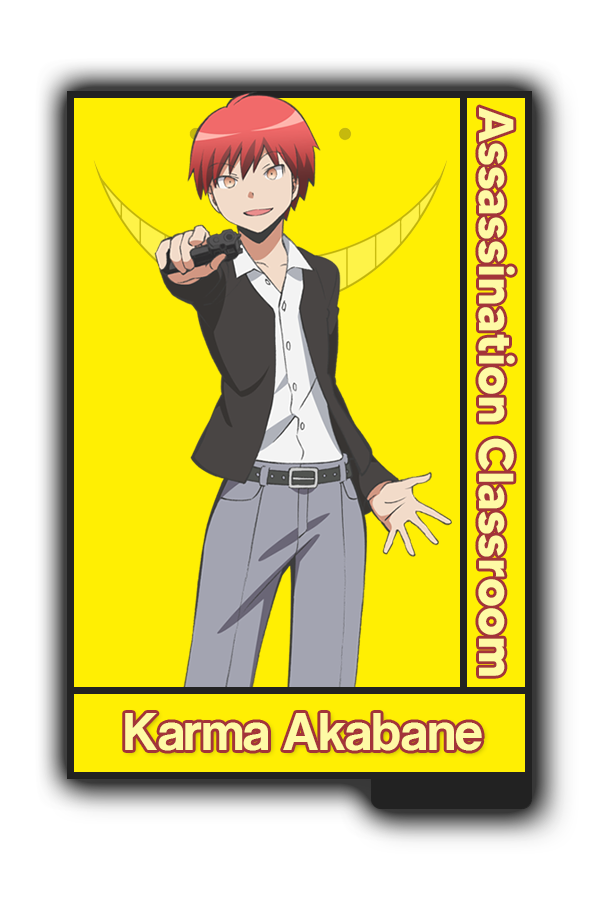
<style>
.page{position:relative;width:600px;height:900px;background:#ffef03}
.page>*{position:absolute;margin:0}
.t1{font:48.8px "MADETOMMY-Bold";color:#fefaa5}
.t2{font:55px "CoolveticaRg-Regular";color:#fefaa5}
</style>
<div class="page">
<p class="t1" style="left:478px;top:107px;width:37px;height:569px;rotate:90deg">Assassination Classroom</p>
<p class="t2" style="left:125px;top:713px;width:357px;height:38px">Karma Akabane</p>
</div>
